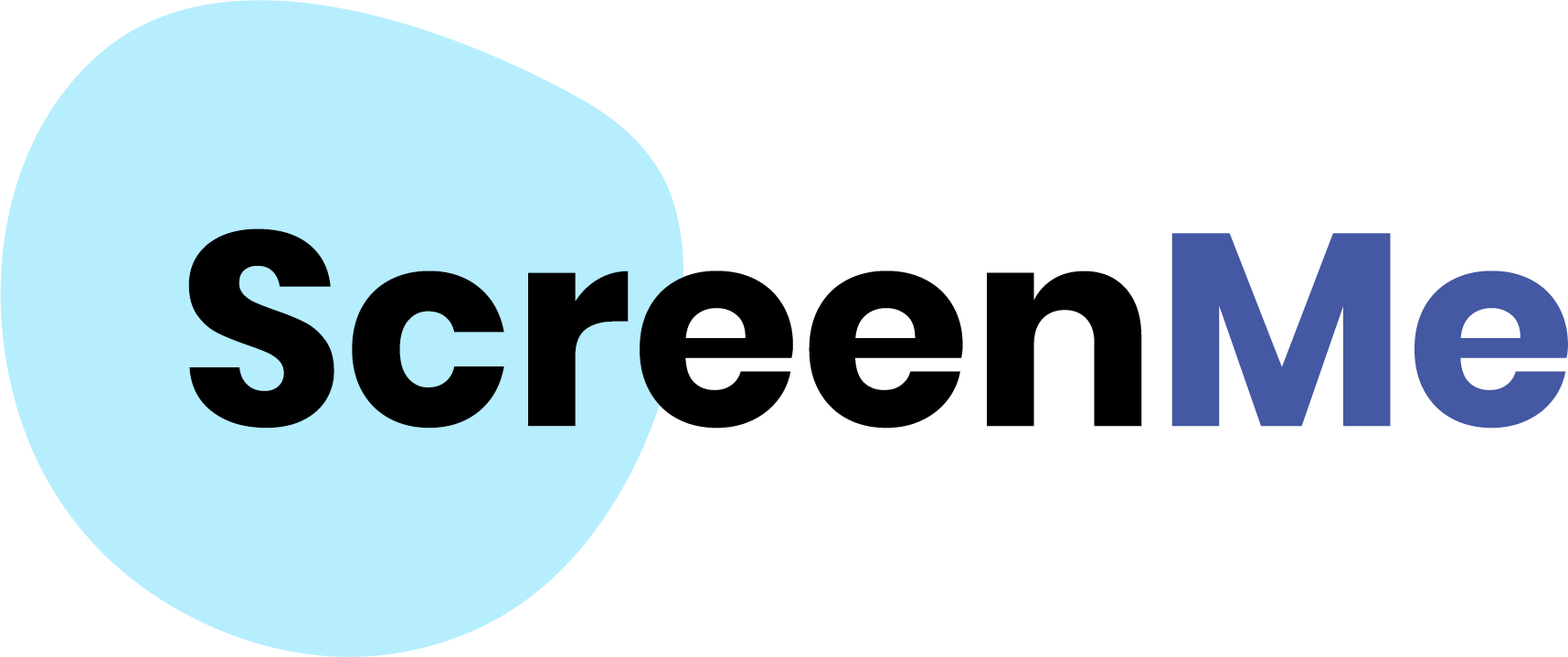
<style>
.page{position:relative;width:1568px;height:657px;background:#ffffff}
.page>*{position:absolute;margin:0}
.t1{font:274.1px "Poppins-Bold";color:#000000}
.t2{font:274.1px "Poppins-Bold";color:#4458a3}
</style>
<div class="page">
<p class="t1" style="left:188px;top:228px;width:1380px;height:201px">Screen<span class="t2">Me</span></p>
</div>
